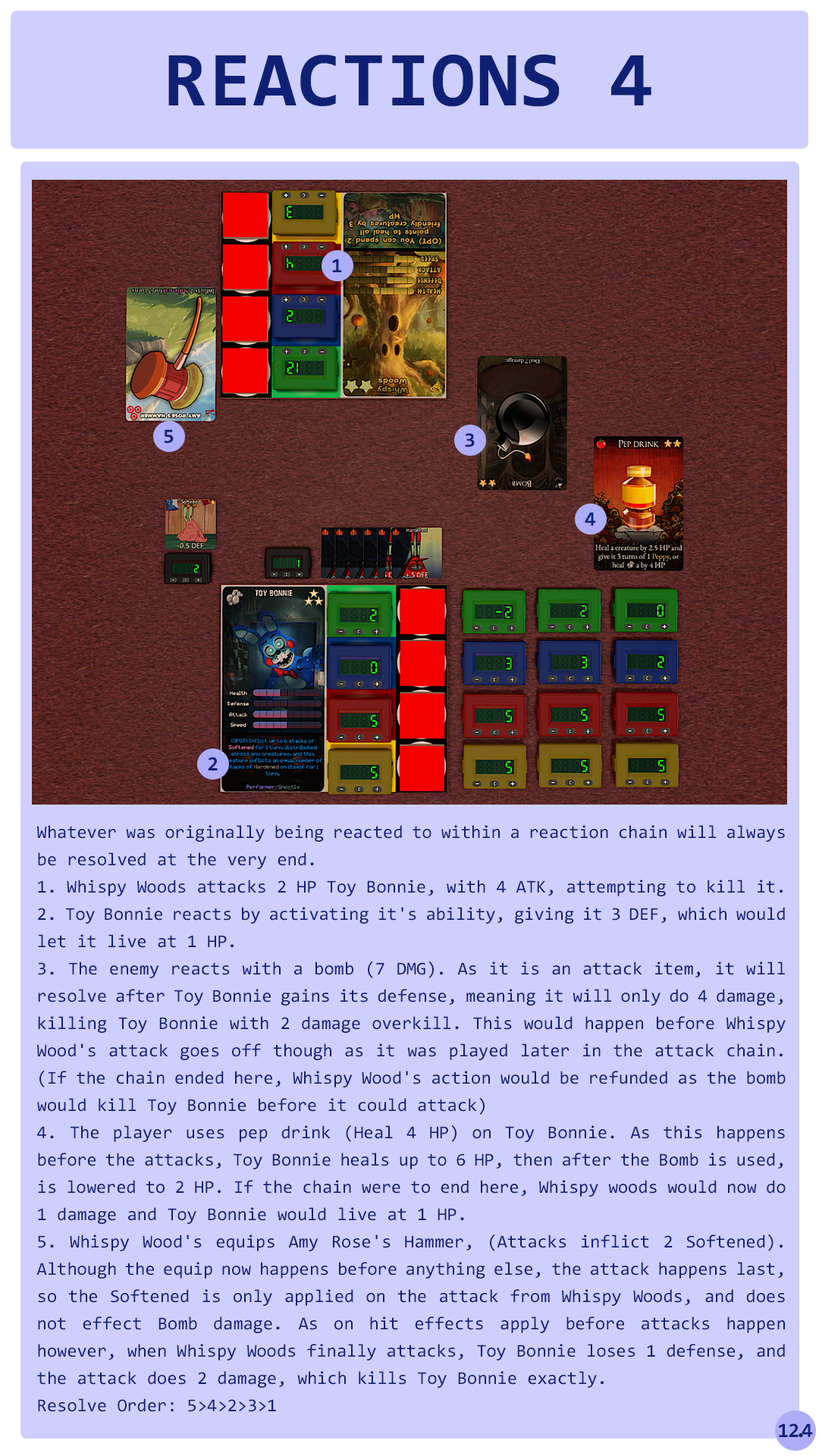
<style>
.page{position:relative;width:819px;height:1456px;background:#cfcfff}
.page>*{position:absolute;margin:0}
.t1{font:78.3px "Consolas-Bold";letter-spacing:0.02em;color:#102175}
.t2{font:20.5px "Consolas-Bold";color:#102175}
.t3{font:18.2px/27.3px "Consolas";color:#102175}
.t4{font:20.5px "Consolas-Bold";letter-spacing:-0.06em;color:#102175}
.t5{font:20.5px "Consolas-Bold";letter-spacing:-0.2em;color:#102175}
.t6{font:20.5px "Consolas-Bold";letter-spacing:-0.22em;color:#102175}
</style>
<div class="page">
<p class="t1" style="left:168px;top:55px;width:483px;height:52px">REACTIONS 4</p>
<p class="t2" style="left:332px;top:259px;width:10px;height:13px">1</p>
<p class="t2" style="left:165px;top:429px;width:9px;height:15px">5</p>
<p class="t2" style="left:465px;top:433px;width:10px;height:14px">3</p>
<p class="t2" style="left:585px;top:512px;width:11px;height:14px">4</p>
<p class="t2" style="left:208px;top:757px;width:10px;height:13px">2</p>
<p class="t3" style="left:36px;top:825px;width:750px;height:587px;text-align:justify">Whatever was originally being reacted to within a reaction chain will always be resolved at the very end.<br>1. Whispy Woods attacks 2 HP Toy Bonnie, with 4 ATK, attempting to kill it.<br>2. Toy Bonnie reacts by activating it's ability, giving it 3 DEF, which would let it live at 1 HP.<br>3. The enemy reacts with a bomb (7 DMG). As it is an attack item, it will resolve after Toy Bonnie gains its defense, meaning it will only do 4 damage, killing Toy Bonnie with 2 damage overkill. This would happen before Whispy Wood's attack goes off though as it was played later in the attack chain. (If the chain ended here, Whispy Wood's action would be refunded as the bomb would kill Toy Bonnie before it could attack)<br>4. The player uses pep drink (Heal 4 HP) on Toy Bonnie. As this happens before the attacks, Toy Bonnie heals up to 6 HP, then after the Bomb is used, is lowered to 2 HP. If the chain were to end here, Whispy woods would now do 1 damage and Toy Bonnie would live at 1 HP.<br>5. Whispy Wood's equips Amy Rose's Hammer, (Attacks inflict 2 Softened). Although the equip now happens before anything else, the attack happens last, so the Softened is only applied on the attack from Whispy Woods, and does not effect Bomb damage. As on hit effects apply before attacks happen however, when Whispy Woods finally attacks, Toy Bonnie loses 1 defense, and the attack does 2 damage, which kills Toy Bonnie exactly.<br>Resolve Order: 5&gt;4&gt;2&gt;3&gt;1</p>
<p class="t4" style="left:778px;top:1423px;width:35px;height:15px">1<span class="t5">2</span><span class="t6">.</span>4</p>
</div>
